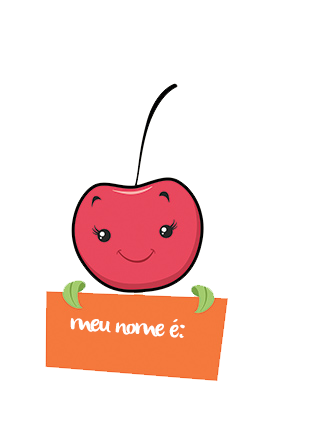
<style>
.page{position:relative;width:316px;height:445px;background:#ffffff}
.page>*{position:absolute;margin:0}
.t1{font:25.5px "olivier";letter-spacing:-0.05em;color:#ffffff}
</style>
<div class="page">
<p class="t1" style="left:70px;top:318px;width:115px;height:20px;rotate:4deg">meu nome é:</p>
</div>
